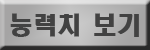
<style>
.page{position:relative;width:150px;height:50px}
.page>*{position:absolute;margin:0}
.t1{font:24px "HeadlineR-HM";color:#424242}
</style>
<div class="page">
<p class="t1" style="left:10px;top:13px;width:129px;height:24px">능력치 보기</p>
</div>
